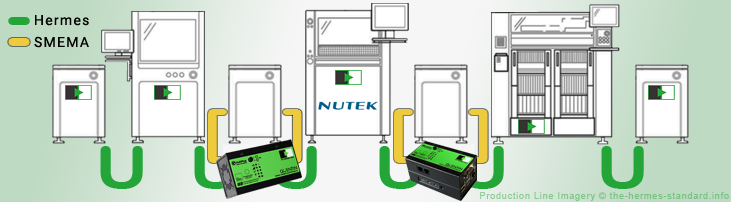
<style>
.page{position:relative;width:731px;height:202px}
.page>*{position:absolute;margin:0}
.t1{font:72px "ArialRoundedMTBold";letter-spacing:0.09em;color:#23a538}
.t2{font:14px "Roboto-Regular";letter-spacing:0.09em;color:#010101}
.t3{font:72px "ArialRoundedMTBold";letter-spacing:0.09em;color:#eeca3d}
.t4{font:60px "ArialRoundedMTBold";letter-spacing:0.1em;color:#eeca3d;scale:1.17 1}
.t5{font:60px "ArialRoundedMTBold";letter-spacing:0.1em;color:#23a538;scale:1.17 1}
.t6{font:60px "ArialRoundedMTBold";letter-spacing:0.1em;scale:1.17 1}
.t7{font:9px "ArialMT";letter-spacing:0.09em;color:#79c385}
</style>
<div class="page">
<p class="t1" style="left:8px;top:17px;width:22px;height:8px">-</p>
<p class="t2" style="left:35px;top:15px;width:54px;height:11px">Hermes</p>
<p class="t3" style="left:8px;top:38px;width:22px;height:8px">-</p>
<p class="t2" style="left:34px;top:36px;width:55px;height:12px">SMEMA</p>
<p class="t4" style="left:208px;top:109px;width:19px;height:54px">[</p>
<p class="t4" style="left:282px;top:109px;width:20px;height:54px">]</p>
<p class="t4" style="left:394px;top:109px;width:19px;height:54px">[</p>
<p class="t4" style="left:468px;top:109px;width:20px;height:54px">]</p>
<p class="t5" style="left:100px;top:146px;width:43px;height:43px">U</p>
<p class="t6" style="left:194px;top:146px;width:43px;height:43px">U</p>
<p class="t6" style="left:274px;top:146px;width:43px;height:43px">U</p>
<p class="t5" style="left:379px;top:146px;width:43px;height:43px">U</p>
<p class="t6" style="left:461px;top:146px;width:43px;height:43px">U</p>
<p class="t5" style="left:601px;top:146px;width:43px;height:43px">U</p>
<p class="t7" style="left:480px;top:192px;width:249px;height:9px">Production Line Imagery © the-hermes-standard.info</p>
</div>
